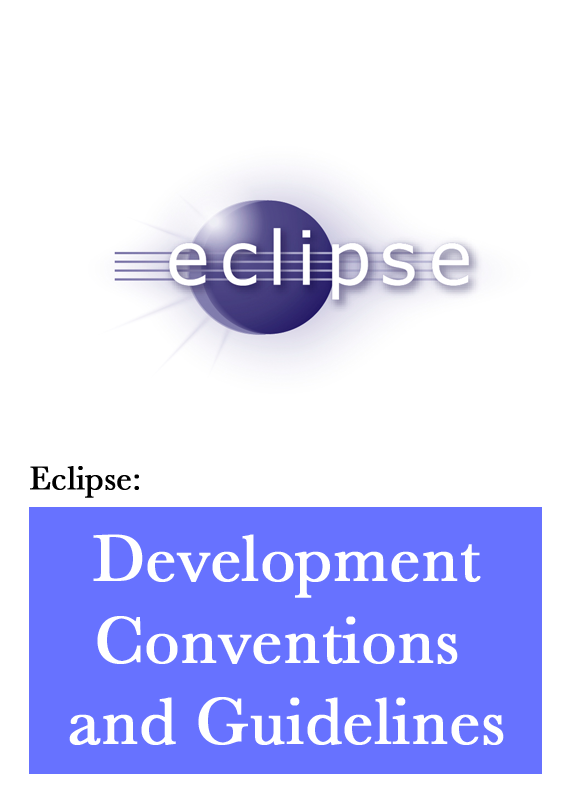
<style>
.page{position:relative;width:572px;height:800px;background:#ffffff}
.page>*{position:absolute;margin:0}
.t1{font:34px "Baskerville";color:#000000;font-weight:bold}
.t2{font:68px "Baskerville";color:#ffffff;font-weight:bold}
</style>
<div class="page">
<p class="t1" style="left:30px;top:466px;width:109px;height:32px">Eclipse:</p>
<p class="t2" style="left:69px;top:534px;width:435px;height:211px;text-align:center">Development<br>Conventions <br>and Guidelines</p>
</div>
